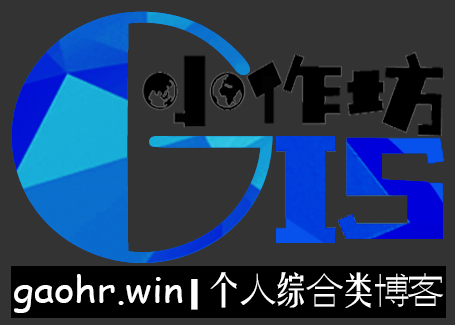
<style>
.page{position:relative;width:455px;height:325px;background:#333333}
.page>*{position:absolute;margin:0}
.t1{font:355.4px "Broadway";scale:1.03 1}
.t2{font:36.4px "ComicSansMS";color:#ffffff;scale:1.07 1}
.t3{font:36.4px "Broadway";color:#ffffff;font-weight:bold;scale:1.07 1}
.t4{font:36.4px "HGYT_CNKI";letter-spacing:-0.14em;color:#ffffff;scale:1.07 1}
.t5{font:36.4px "HGGG_CNKI";letter-spacing:-0.14em;color:#ffffff;scale:1.07 1}
</style>
<div class="page">
<p class="t1" style="left:11px;top:11px;width:262px;height:252px">G</p>
<p class="t2" style="left:14px;top:272px;width:429px;height:41px">gaohr.win<span class="t3">|</span><span class="t4">个</span><span class="t5">人</span><span class="t4">综</span><span class="t5">合</span><span class="t4">类</span><span class="t5">博客</span></p>
</div>
